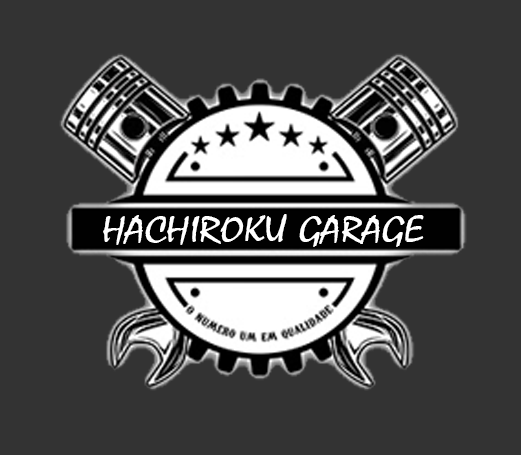
<style>
.page{position:relative;width:521px;height:455px;background:#333333}
.page>*{position:absolute;margin:0}
.t1{font:38.1px "Mistral";color:#ffffff;scale:1.19 1}
</style>
<div class="page">
<p class="t1" style="left:103px;top:214px;width:321px;height:33px">HACHIROKU GARAGE</p>
</div>
